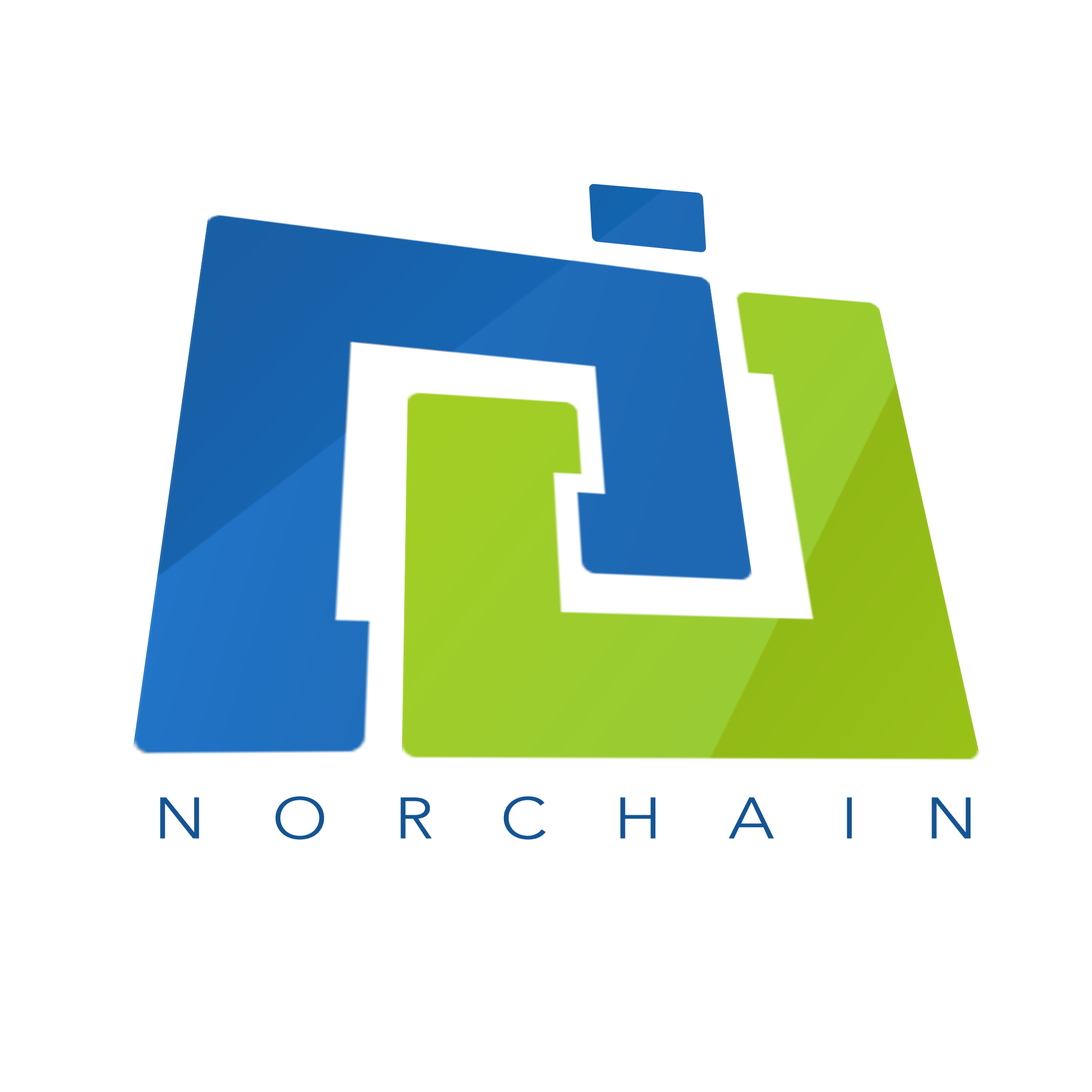
<style>
.page{position:relative;width:1092px;height:1092px;background:#ffffff}
.page>*{position:absolute;margin:0}
.t1{font:57.6px "Avenir-Light";letter-spacing:1em;color:#145494;font-weight:bold;scale:1.13 1}
</style>
<div class="page">
<p class="t1" style="left:160px;top:796px;width:811px;height:44px">NORCHAIN</p>
</div>
